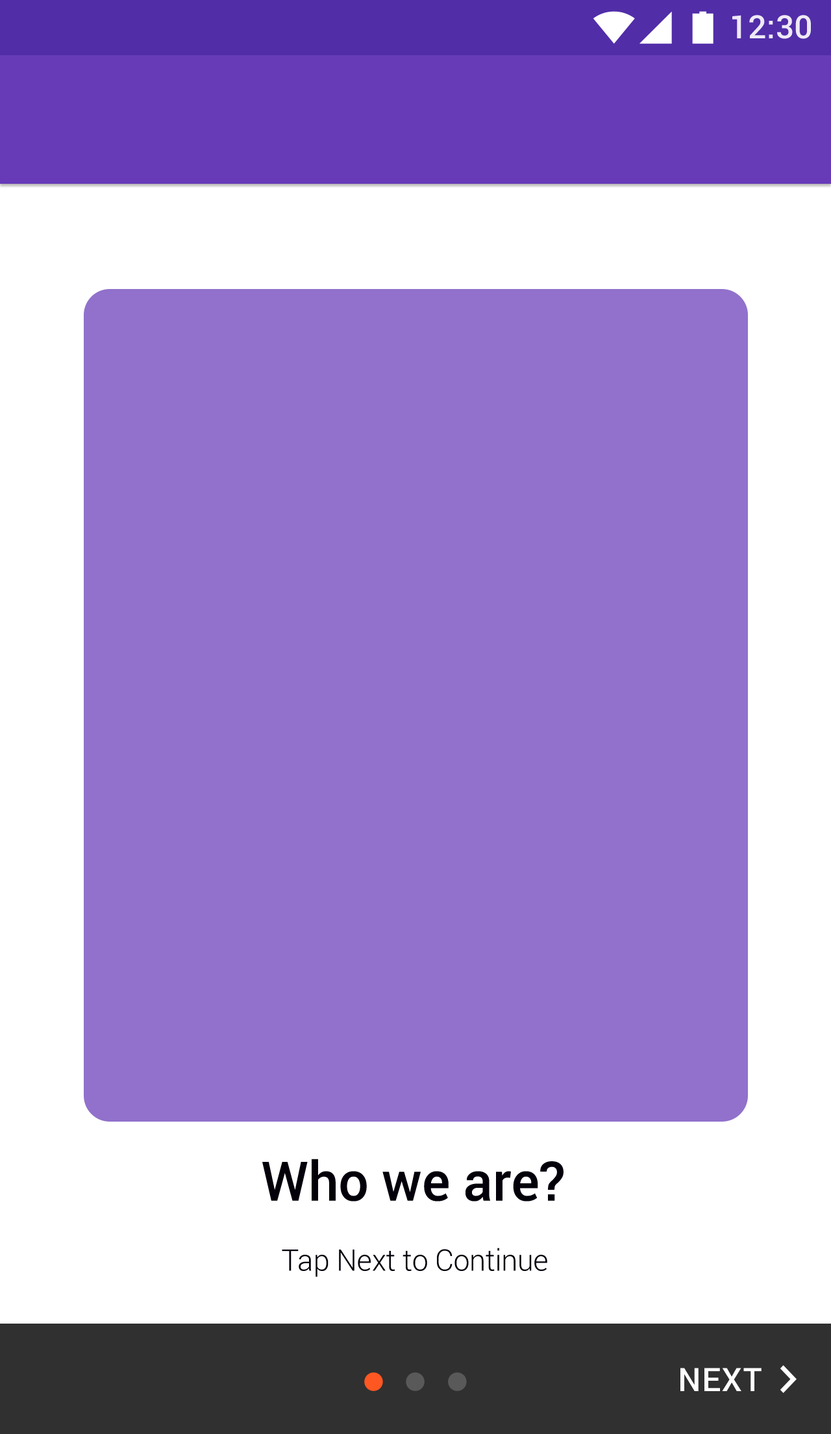
<style>
.page{position:relative;width:831px;height:1434px;background:#9171cb}
.page>*{position:absolute;margin:0}
.t1{font:32.2px "Roboto-Medium";color:#eeeaf6}
.t2{font:54.4px "Roboto-Medium";color:#04000a}
.t3{font:29.7px "Roboto-Light";color:#04000a}
.t4{font:32.4px "Roboto-Medium";letter-spacing:0.03em;color:#ffffff}
</style>
<div class="page">
<p class="t1" style="left:733px;top:15px;width:78px;height:24px">12:30</p>
<p class="t2" style="left:262px;top:1159px;width:302px;height:43px">Who we are?</p>
<p class="t3" style="left:282px;top:1248px;width:266px;height:29px">Tap Next to Continue</p>
<p class="t4" style="left:681px;top:1368px;width:81px;height:23px">NEXT</p>
</div>
